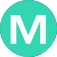
<style>
.page{position:relative;width:57px;height:57px;background:#33d6b3}
.page>*{position:absolute;margin:0}
.t1{font:40.8px "AvenirNext-DemiBold";color:#fdfdfd;scale:1.13 1}
</style>
<div class="page">
<p class="t1" style="left:10px;top:15px;width:36px;height:29px">M</p>
</div>
